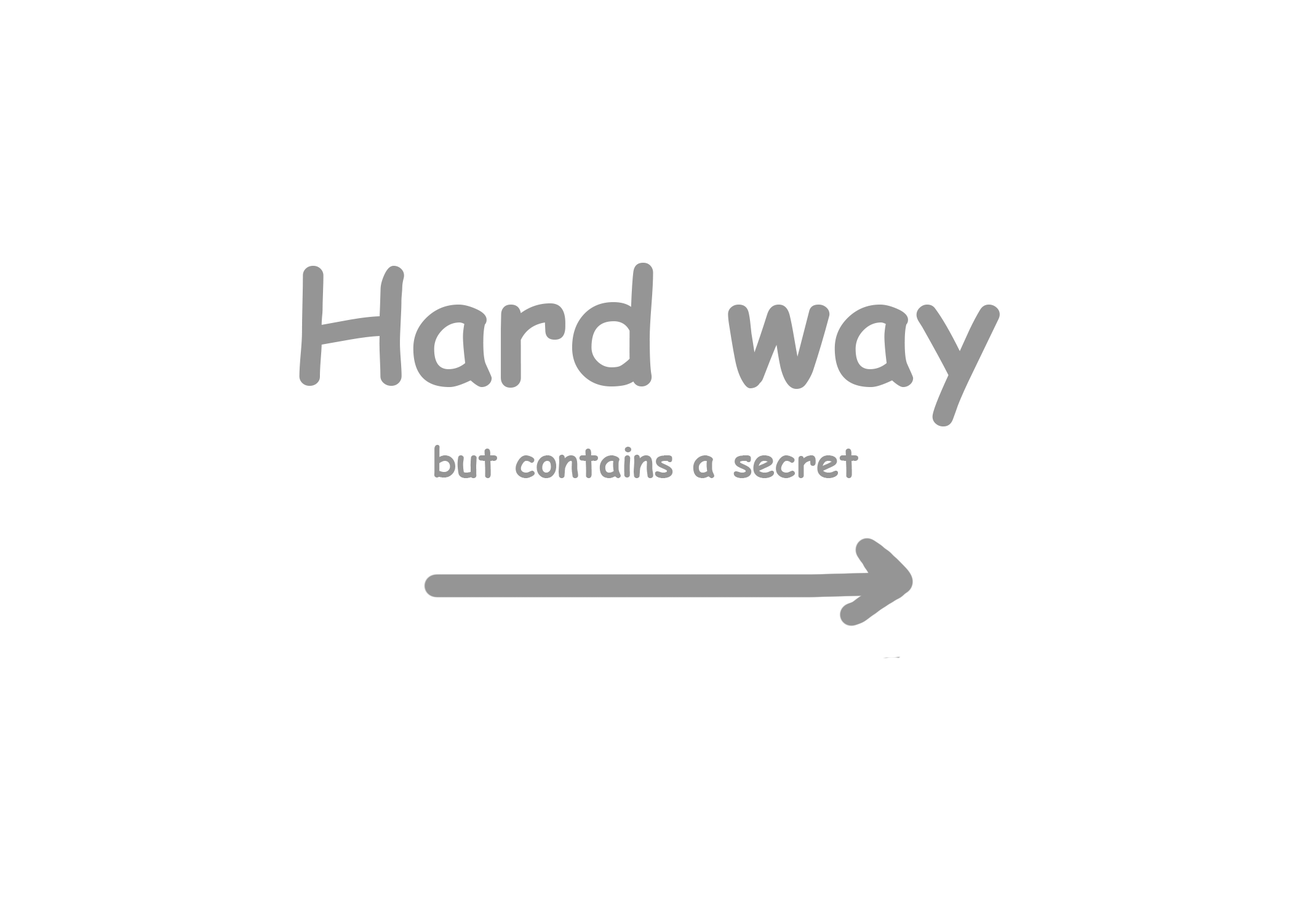
<style>
.page{position:relative;width:1292px;height:923px;background:#ffffff}
.page>*{position:absolute;margin:0}
.t1{font:153.8px "ComicSansMS-Bold";color:#959595}
.t2{font:41px "ComicSansMS-Bold";color:#959595}
</style>
<div class="page">
<p class="t1" style="left:299px;top:263px;width:701px;height:163px">Hard way</p>
<p class="t2" style="left:434px;top:445px;width:424px;height:33px">but contains a secret</p>
</div>
